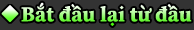
<style>
.page{position:relative;width:194px;height:30px;background:#333333}
.page>*{position:absolute;margin:0}
.t1{font:21px "SourceSerifRoman-Bold";letter-spacing:0.011em}
</style>
<div class="page">
<p class="t1" style="left:21px;top:2px;width:171px;height:24px">Bắt đầu lại từ đầu</p>
</div>
